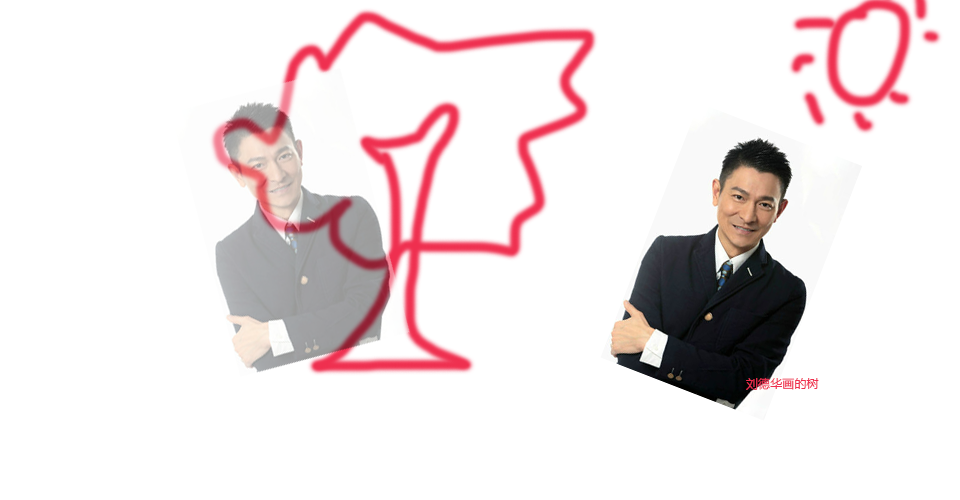
<style>
.page{position:relative;width:960px;height:500px;background:#ffffff}
.page>*{position:absolute;margin:0}
.t1{font:12px "MicrosoftYaHei";letter-spacing:0.01em;color:#ef2f4f}
</style>
<div class="page">
<p class="t1" style="left:746px;top:377px;width:73px;height:13px">刘德华画的树</p>
</div>
